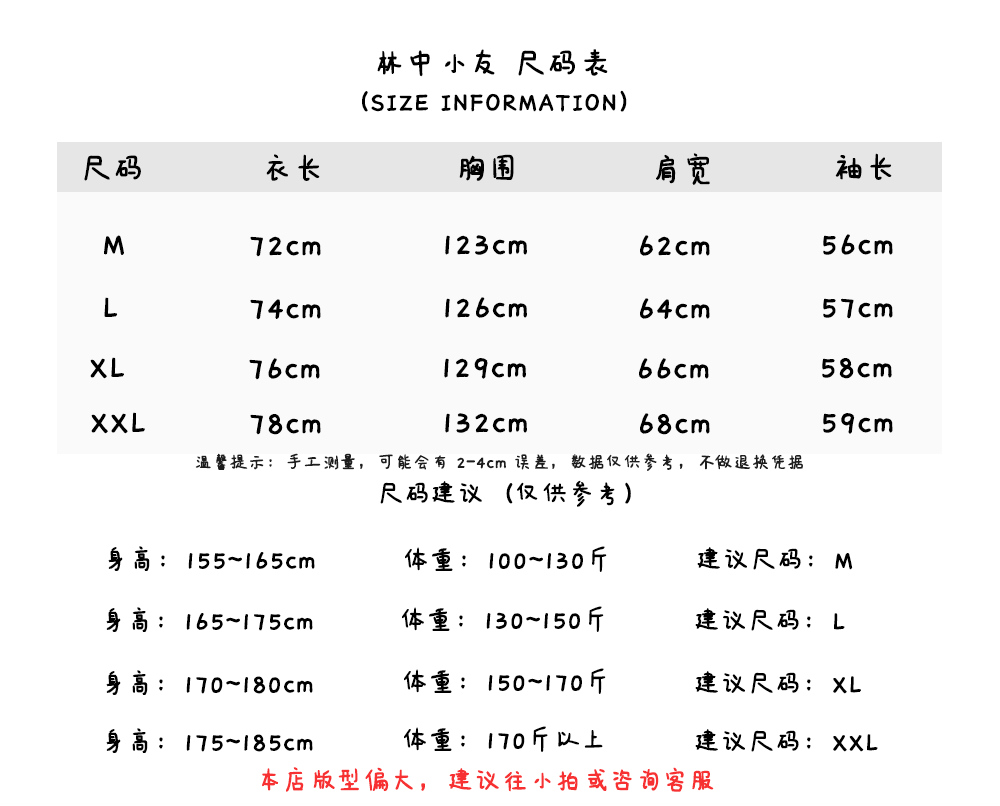
<style>
.page{position:relative;width:1000px;height:806px;background:#ffffff}
.page>*{position:absolute;margin:0}
.t1{font:36px "IdeaFonts-QianXiaTi";color:#000000;font-weight:bold}
.t2{font:30px "IdeaFonts-QianXiaTi";color:#000000;font-weight:bold}
.t3{font:20px "IdeaFonts-QianXiaTi";color:#1e1d1d;font-weight:bold}
.t4{font:30px "IdeaFonts-QianXiaTi";color:#f73131;font-weight:bold}
</style>
<div class="page">
<p class="t1" style="left:377px;top:49px;width:231px;height:28px">林中小友 尺码表</p>
<p class="t2" style="left:362px;top:90px;width:265px;height:22px">（SIZE INFORMATION）</p>
<p class="t1" style="left:84px;top:155px;width:57px;height:26px">尺码</p>
<p class="t1" style="left:266px;top:154px;width:54px;height:27px">衣长</p>
<p class="t1" style="left:459px;top:154px;width:55px;height:27px">胸围</p>
<p class="t1" style="left:656px;top:153px;width:54px;height:32px">肩宽</p>
<p class="t1" style="left:835px;top:153px;width:57px;height:27px">袖长</p>
<p class="t1" style="left:104px;top:235px;width:20px;height:20px">M</p>
<p class="t1" style="left:250px;top:236px;width:71px;height:21px">72cm</p>
<p class="t1" style="left:445px;top:235px;width:82px;height:20px">123cm</p>
<p class="t1" style="left:640px;top:235px;width:70px;height:21px">62cm</p>
<p class="t1" style="left:823px;top:234px;width:70px;height:21px">56cm</p>
<p class="t1" style="left:104px;top:297px;width:14px;height:20px">L</p>
<p class="t1" style="left:250px;top:299px;width:71px;height:21px">74cm</p>
<p class="t1" style="left:445px;top:297px;width:82px;height:21px">126cm</p>
<p class="t1" style="left:640px;top:298px;width:70px;height:21px">64cm</p>
<p class="t1" style="left:823px;top:298px;width:70px;height:21px">57cm</p>
<p class="t1" style="left:90px;top:357px;width:34px;height:22px">XL</p>
<p class="t1" style="left:249px;top:358px;width:71px;height:22px">76cm</p>
<p class="t1" style="left:444px;top:358px;width:82px;height:21px">129cm</p>
<p class="t1" style="left:639px;top:358px;width:70px;height:21px">66cm</p>
<p class="t1" style="left:822px;top:358px;width:70px;height:21px">58cm</p>
<p class="t1" style="left:91px;top:412px;width:54px;height:22px">XXL</p>
<p class="t1" style="left:250px;top:414px;width:71px;height:21px">78cm</p>
<p class="t1" style="left:445px;top:413px;width:82px;height:20px">132cm</p>
<p class="t1" style="left:640px;top:413px;width:70px;height:22px">68cm</p>
<p class="t1" style="left:823px;top:413px;width:70px;height:21px">59cm</p>
<p class="t3" style="left:195px;top:453px;width:608px;height:18px">温馨提示：手工测量，可能会有 2-4cm 误差，数据仅供参考，不做退换凭据</p>
<p class="t2" style="left:380px;top:480px;width:251px;height:27px">尺码建议（仅供参考）</p>
<p class="t2" style="left:108px;top:546px;width:207px;height:25px">身高：155~165cm</p>
<p class="t2" style="left:405px;top:546px;width:202px;height:26px">体重：100~130斤</p>
<p class="t2" style="left:697px;top:547px;width:156px;height:23px">建议尺码：M</p>
<p class="t2" style="left:402px;top:606px;width:202px;height:26px">体重：130~150斤</p>
<p class="t2" style="left:106px;top:607px;width:207px;height:25px">身高：165~175cm</p>
<p class="t2" style="left:695px;top:608px;width:150px;height:23px">建议尺码：L</p>
<p class="t2" style="left:106px;top:670px;width:207px;height:25px">身高：170~180cm</p>
<p class="t2" style="left:404px;top:668px;width:202px;height:26px">体重：150~170斤</p>
<p class="t2" style="left:695px;top:671px;width:166px;height:23px">建议尺码：XL</p>
<p class="t2" style="left:404px;top:726px;width:199px;height:26px">体重：170斤以上</p>
<p class="t2" style="left:106px;top:728px;width:207px;height:25px">身高：175~185cm</p>
<p class="t2" style="left:695px;top:729px;width:183px;height:23px">建议尺码：XXL</p>
<p class="t4" style="left:262px;top:767px;width:452px;height:25px">本店版型偏大，建议往小拍或咨询客服</p>
</div>
